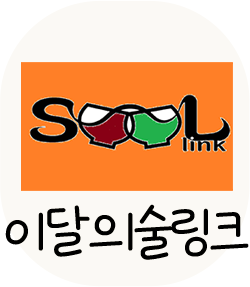
<style>
.page{position:relative;width:250px;height:287px;background:#fbf9f5}
.page>*{position:absolute;margin:0}
.t1{font:76.4px "GangwonEduSaeeumMedium";letter-spacing:-0.05em;color:#000000}
</style>
<div class="page">
<p class="t1" style="left:5px;top:204px;width:244px;height:56px">이달의술링크</p>
</div>
